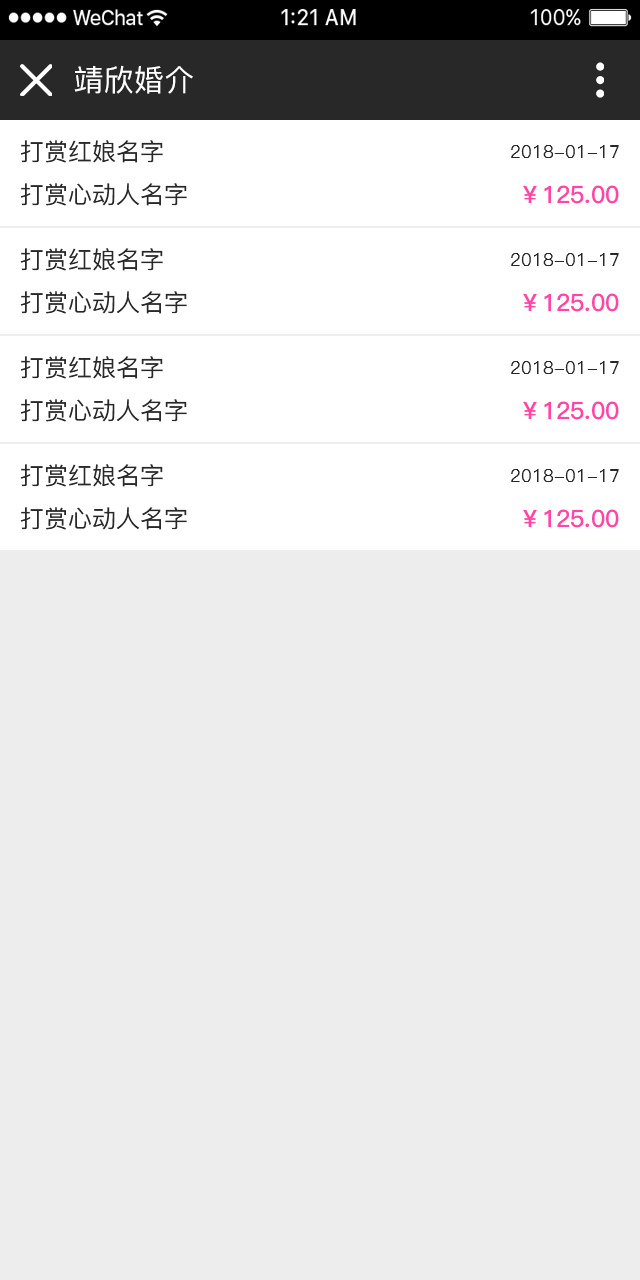
<style>
.page{position:relative;width:640px;height:1280px;background:#ededed}
.page>*{position:absolute;margin:0}
.t1{font:30px "PingFang-SC-Medium";letter-spacing:0.01em;color:#ffffff;text-transform:uppercase}
.t2{font:24px "PingFang-SC-Medium";color:#282828;text-transform:uppercase}
.t3{font:18px "PingFang-SC-Medium";color:#282828;text-transform:uppercase}
.t4{font:24px "PingFang-SC-Bold";color:#ff45a8;text-transform:uppercase}
</style>
<div class="page">
<p class="t1" style="left:74px;top:65px;width:119px;height:29px">靖欣婚介</p>
<p class="t2" style="left:20px;top:140px;width:143px;height:23px">打赏红娘名字</p>
<p class="t3" style="left:511px;top:145px;width:108px;height:13px">2018-01-17</p>
<p class="t2" style="left:20px;top:183px;width:167px;height:23px">打赏心动人名字</p>
<p class="t4" style="left:523px;top:185px;width:96px;height:19px">￥125.00</p>
<p class="t2" style="left:20px;top:248px;width:143px;height:23px">打赏红娘名字</p>
<p class="t3" style="left:511px;top:253px;width:108px;height:13px">2018-01-17</p>
<p class="t2" style="left:20px;top:291px;width:167px;height:23px">打赏心动人名字</p>
<p class="t4" style="left:523px;top:293px;width:96px;height:19px">￥125.00</p>
<p class="t2" style="left:20px;top:356px;width:143px;height:23px">打赏红娘名字</p>
<p class="t3" style="left:511px;top:361px;width:108px;height:13px">2018-01-17</p>
<p class="t2" style="left:20px;top:399px;width:167px;height:23px">打赏心动人名字</p>
<p class="t4" style="left:523px;top:401px;width:96px;height:19px">￥125.00</p>
<p class="t2" style="left:20px;top:464px;width:143px;height:23px">打赏红娘名字</p>
<p class="t3" style="left:511px;top:469px;width:108px;height:13px">2018-01-17</p>
<p class="t2" style="left:20px;top:507px;width:167px;height:23px">打赏心动人名字</p>
<p class="t4" style="left:523px;top:509px;width:96px;height:19px">￥125.00</p>
</div>
